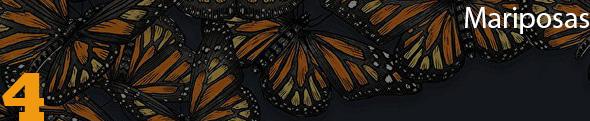
<style>
.page{position:relative;width:590px;height:121px}
.page>*{position:absolute;margin:0}
.t1{font:30px "MyriadPro-Regular";color:#ffffff}
.t2{font:70px "Rockwell-ExtraBold";color:#f09911}
</style>
<div class="page">
<p class="t1" style="left:465px;top:7px;width:124px;height:27px">Mariposas</p>
<p class="t2" style="left:2px;top:73px;width:42px;height:49px">4</p>
</div>
